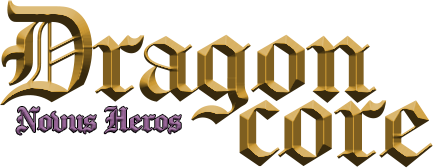
<style>
.page{position:relative;width:433px;height:168px;background:#ffffff}
.page>*{position:absolute;margin:0}
.t1{font:128px "Chomsky";letter-spacing:-0.04em}
.t2{font:33.1px "Chomsky";letter-spacing:-0.04em;color:#996699}
</style>
<div class="page">
<p class="t1" style="left:0px;top:0px;width:377px;height:125px">Dragon</p>
<p class="t1" style="left:239px;top:99px;width:194px;height:69px">core</p>
<p class="t2" style="left:16px;top:106px;width:165px;height:29px">Novus Heros</p>
</div>
